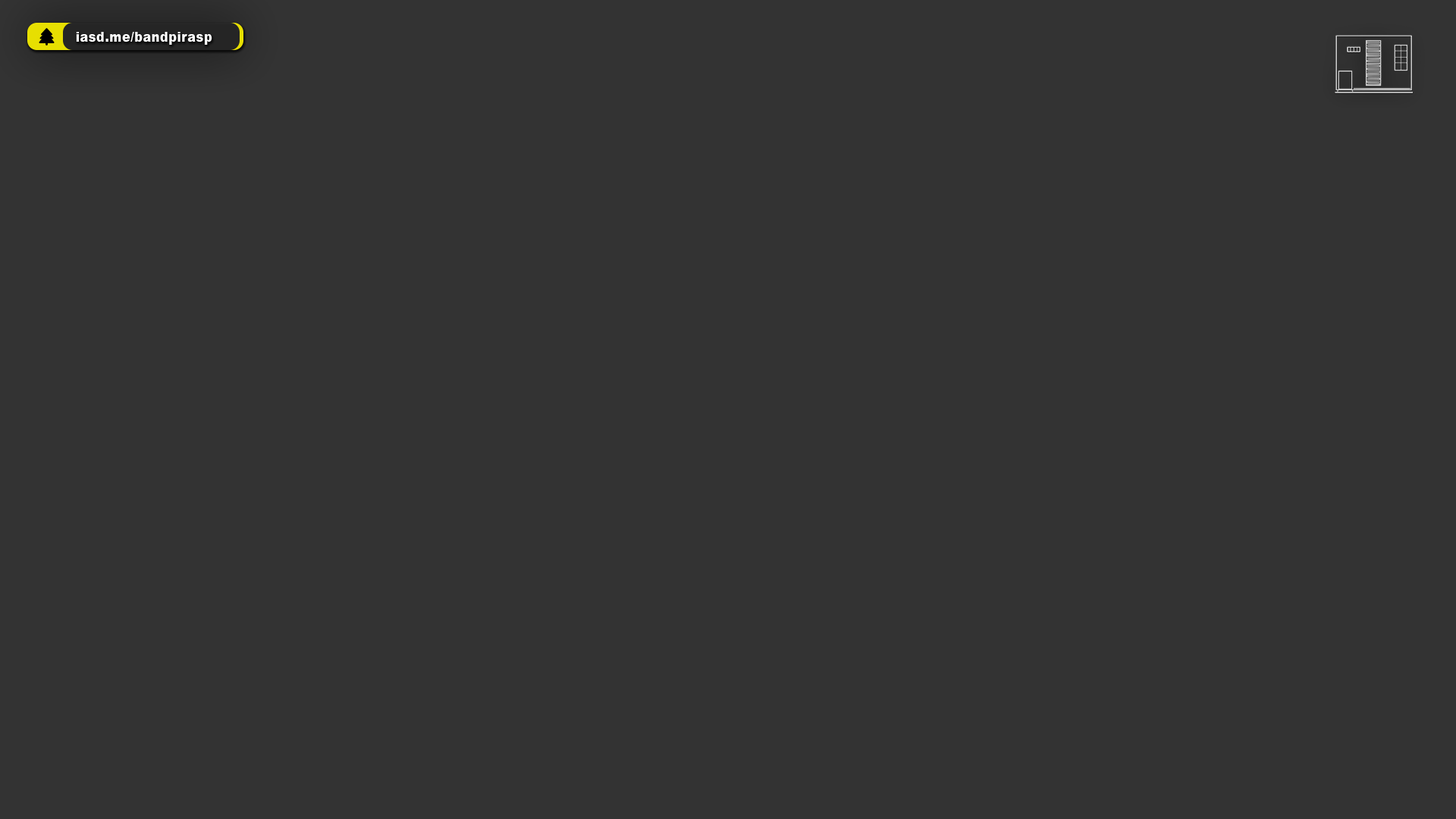
<style>
.page{position:relative;width:1456px;height:819px;background:#333333}
.page>*{position:absolute;margin:0}
.t1{font:13.6px "Arial-Black";letter-spacing:0.025em;color:#ffffff;scale:0.91 1}
</style>
<div class="page">
<p class="t1" style="left:76px;top:32px;width:136px;height:13px">iasd.me/bandpirasp</p>
</div>
